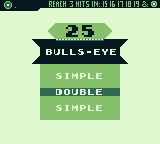
<style>
.page{position:relative;width:160px;height:144px;background:#e0f8cf}
.page>*{position:absolute;margin:0}
.t1{font:16px "Early-GameBoy";color:#071821}
.t2{font:8px/8px "Early-GameBoy";color:#e0f8cf}
</style>
<div class="page">
<p class="t1" style="left:66px;top:25px;width:28px;height:12px">25</p>
<p class="t2" style="left:46px;top:49px;width:70px;height:62px;text-align:center">Bulls-eye<br><br><br>simple<br><br>double<br>   <br>simple</p>
</div>
